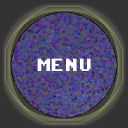
<style>
.page{position:relative;width:128px;height:128px}
.page>*{position:absolute;margin:0}
.t1{font:18px "Commodore-64-Pixelized";color:#ffffff}
</style>
<div class="page">
<p class="t1" style="left:37px;top:58px;width:54px;height:13px">MENU</p>
</div>
